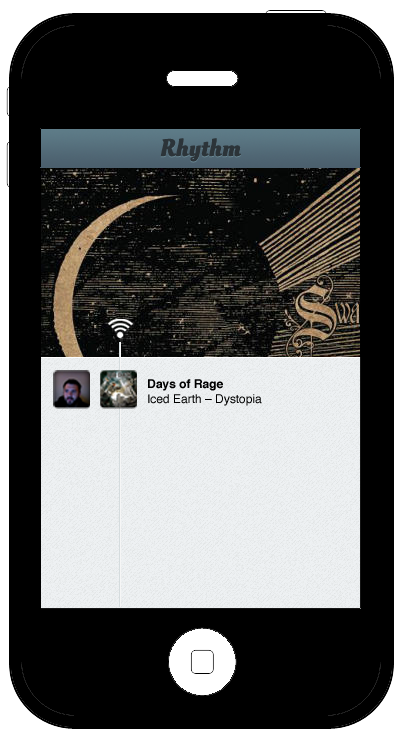
<style>
.page{position:relative;width:400px;height:737px;background:#000000}
.page>*{position:absolute;margin:0}
.t1{font:24px "OleoScript-Bold";color:#2c3439}
.t2{font:12px "Helvetica-Bold";color:#000000}
.t3{font:12px "Helvetica";color:#000000}
</style>
<div class="page">
<p class="t1" style="left:160px;top:138px;width:81px;height:24px">Rhythm</p>
<p class="t2" style="left:148px;top:379px;width:75px;height:12px">Days of Rage</p>
<p class="t3" style="left:148px;top:394px;width:114px;height:12px">Iced Earth – Dystopia</p>
</div>
